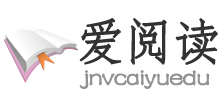
<style>
.page{position:relative;width:220px;height:100px;background:#ffffff}
.page>*{position:absolute;margin:0}
.t1{font:49px "FangSong";letter-spacing:-0.04em;color:#323232;font-weight:bold}
.t2{font:25px "FZSTK--GBK1-0";letter-spacing:-0.04em;color:#929292;font-weight:bold}
</style>
<div class="page">
<p class="t1" style="left:79px;top:18px;width:139px;height:47px">爱阅读</p>
<p class="t2" style="left:79px;top:70px;width:131px;height:19px">jnvcaiyuedu</p>
</div>
